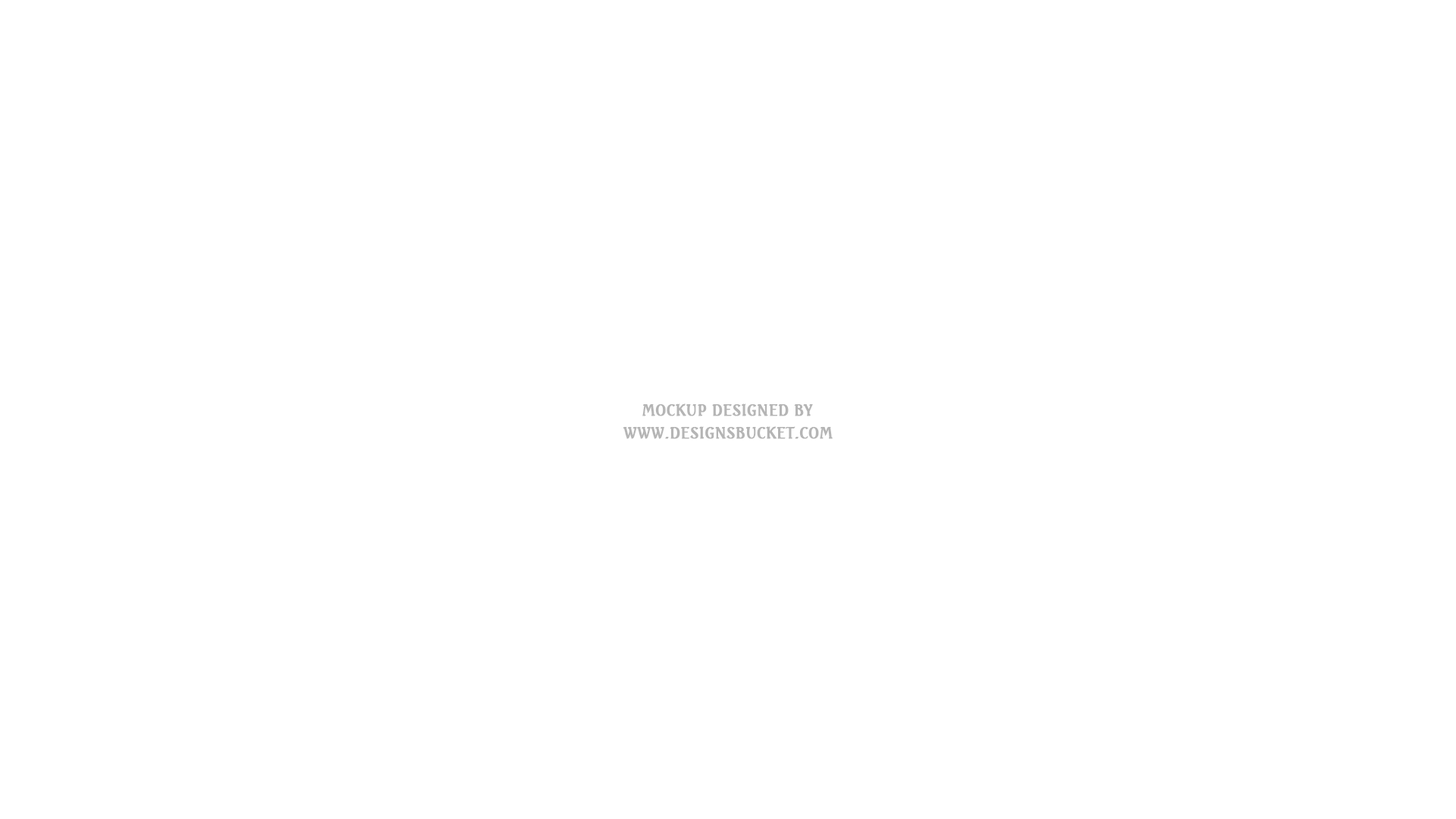
<style>
.page{position:relative;width:1456px;height:819px;background:#ffffff}
.page>*{position:absolute;margin:0}
.t1{font:15.9px "SeagullBT-Medium";color:#b5b5b5;text-transform:uppercase;font-weight:bold}
</style>
<div class="page">
<p class="t1" style="left:642px;top:403px;width:171px;height:13px">Mockup designed by</p>
<p class="t1" style="left:623px;top:426px;width:210px;height:13px">www.designsbucket.com</p>
</div>
